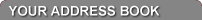
<style>
.page{position:relative;width:202px;height:20px;background:#858585}
.page>*{position:absolute;margin:0}
.t1{font:13.3px "Arial-BoldMT";color:#ffffff}
</style>
<div class="page">
<p class="t1" style="left:8px;top:5px;width:152px;height:11px">YOUR ADDRESS BOOK</p>
</div>
